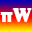
<style>
.page{position:relative;width:32px;height:32px}
.page>*{position:absolute;margin:0}
.t1{font:20px "CooperBlack";color:#ffffff;scale:0.9 1}
</style>
<div class="page">
<p class="t1" style="left:0px;top:8px;width:32px;height:14px">πW</p>
</div>
